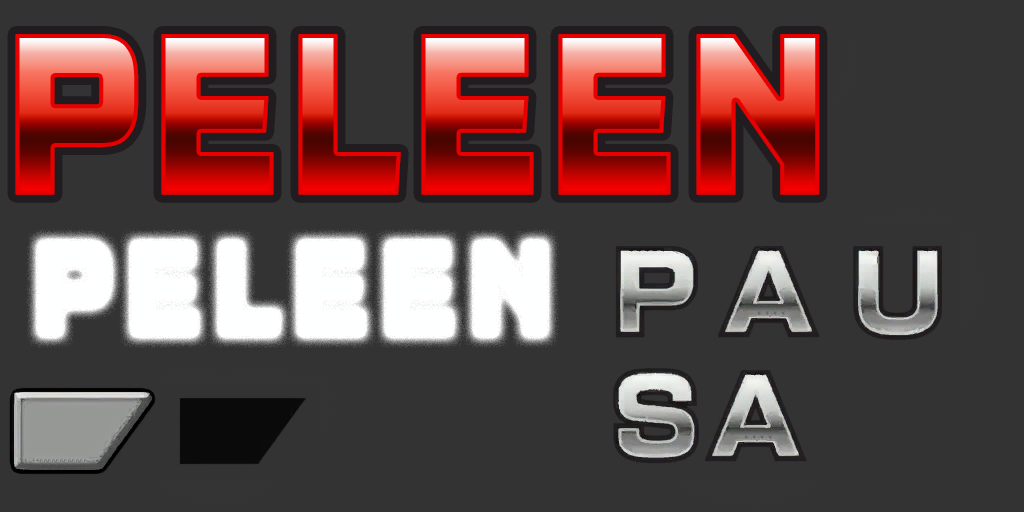
<style>
.page{position:relative;width:1024px;height:512px;background:#333333}
.page>*{position:absolute;margin:0}
.t1{font:238.9px "QTypeSquareWeb-BlackW03-Rg";letter-spacing:-0.04em;font-weight:bold;scale:0.76 1}
.t2{font:138.9px "QTypeSquareWeb-BlackW03-Rg";letter-spacing:0.04em;color:#feffff;font-weight:bold;scale:0.76 1}
</style>
<div class="page">
<p class="t1" style="left:15px;top:34px;width:805px;height:161px">peleen</p>
<p class="t2" style="left:38px;top:241px;width:509px;height:95px">peleen</p>
</div>
